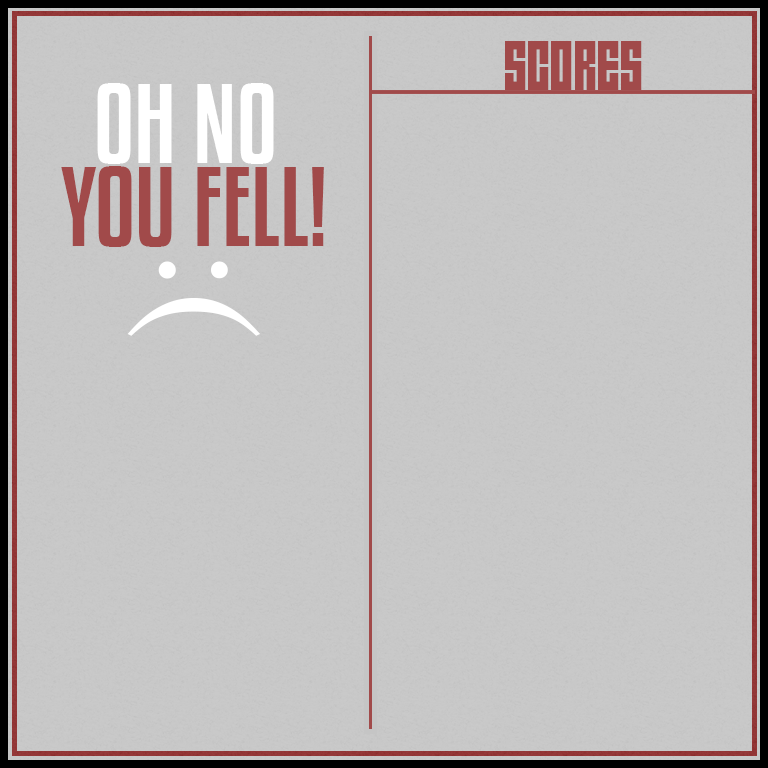
<style>
.page{position:relative;width:768px;height:768px;background:#c8c8c8}
.page>*{position:absolute;margin:0}
.t1{font:58px "AngiesNewHouse";color:#a14a4a}
.t2{font:100px "KenyanCoffeeRg-Regular";color:#ffffff}
.t3{font:100px "KenyanCoffeeRg-Regular";color:#a14a4a}
.t4{font:141.9px "Century";color:#ffffff}
</style>
<div class="page">
<p class="t1" style="left:505px;top:41px;width:137px;height:49px">SCORES</p>
<p class="t2" style="left:97px;top:83px;width:177px;height:81px">OH NO</p>
<p class="t3" style="left:61px;top:166px;width:263px;height:81px">YOU FELL!</p>
<p class="t4" style="left:127px;top:261px;width:133px;height:75px;rotate:90deg">:(</p>
</div>
